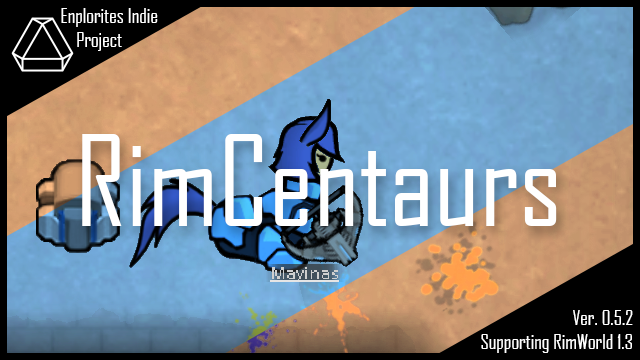
<style>
.page{position:relative;width:640px;height:360px}
.page>*{position:absolute;margin:0}
.t1{font:20px "AgencyFB-Reg";color:#ffffff}
.t2{font:120px "AgencyFB-Reg";color:#ffffff}
</style>
<div class="page">
<p class="t1" style="left:61px;top:8px;width:97px;height:43px">Enplorites Indie<br>    Project</p>
<p class="t2" style="left:82px;top:134px;width:475px;height:92px">RimCentaurs</p>
<p class="t1" style="left:481px;top:310px;width:152px;height:43px;text-align:right">Ver. 0.5.2<br>Supporting RimWorld 1.3</p>
</div>
